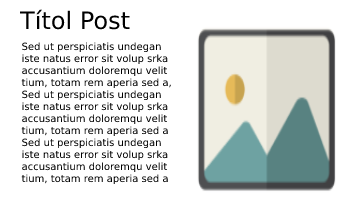
<style>
.page{position:relative;width:350px;height:200px;background:#ffffff}
.page>*{position:absolute;margin:0}
.t1{font:24px "DejaVuSans";color:#000000}
.t2{font:10px "DejaVuSans";color:#000000}
</style>
<div class="page">
<p class="t1" style="left:20px;top:9px;width:110px;height:21px">Títol Post</p>
<p class="t2" style="left:21px;top:42px;width:150px;height:143px">Sed ut perspiciatis undegan<br>iste natus error sit volup srka<br>accusantium doloremqu velit<br>tium, totam rem aperia sed a,<br>Sed ut perspiciatis undegan<br>iste natus error sit volup srka<br>accusantium doloremqu velit<br>tium, totam rem aperia sed a<br>Sed ut perspiciatis undegan<br>iste natus error sit volup srka<br>accusantium doloremqu velit<br>tium, totam rem aperia sed a</p>
</div>
